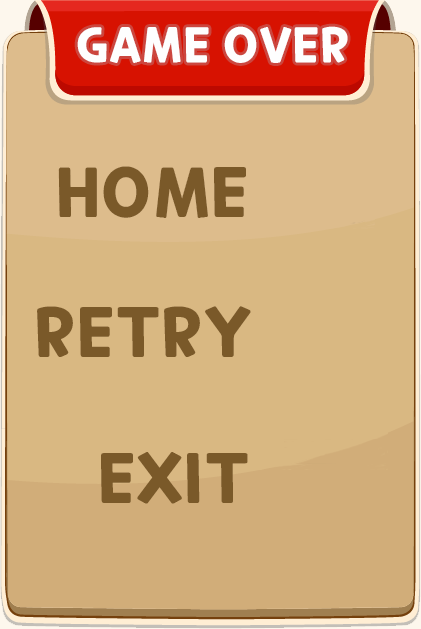
<style>
.page{position:relative;width:421px;height:629px;background:#d9b882}
.page>*{position:absolute;margin:0}
.t1{font:48px "CookieRun-Bold";color:#fefefe}
.t2{font:68px "CookieRun-Bold";color:#7a5929}
</style>
<div class="page">
<p class="t1" style="left:77px;top:26px;width:271px;height:37px">GAME OVER</p>
<p class="t2" style="left:58px;top:166px;width:188px;height:52px">HOME</p>
<p class="t2" style="left:37px;top:306px;width:214px;height:51px">RETRY</p>
<p class="t2" style="left:101px;top:452px;width:147px;height:52px">EXIT</p>
</div>
